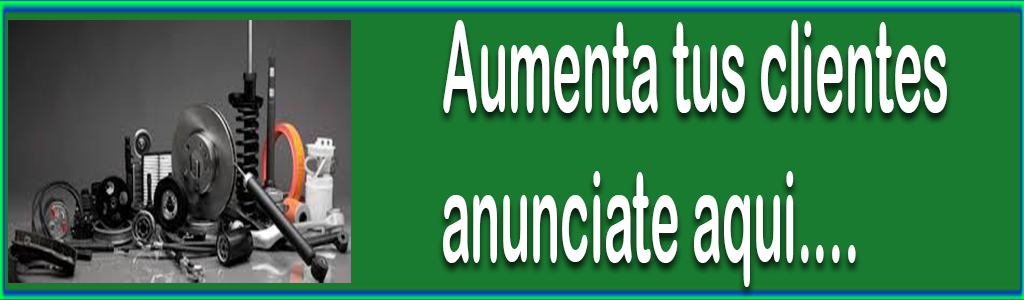
<style>
.page{position:relative;width:1024px;height:300px;background:#197b30}
.page>*{position:absolute;margin:0}
.t1{font:125px "ArialRoundedMTBold";color:#ffffff;scale:0.4 1}
</style>
<div class="page">
<p class="t1" style="left:443px;top:20px;width:504px;height:267px">Aumenta tus clientes<br>anunciate aqui....</p>
</div>
